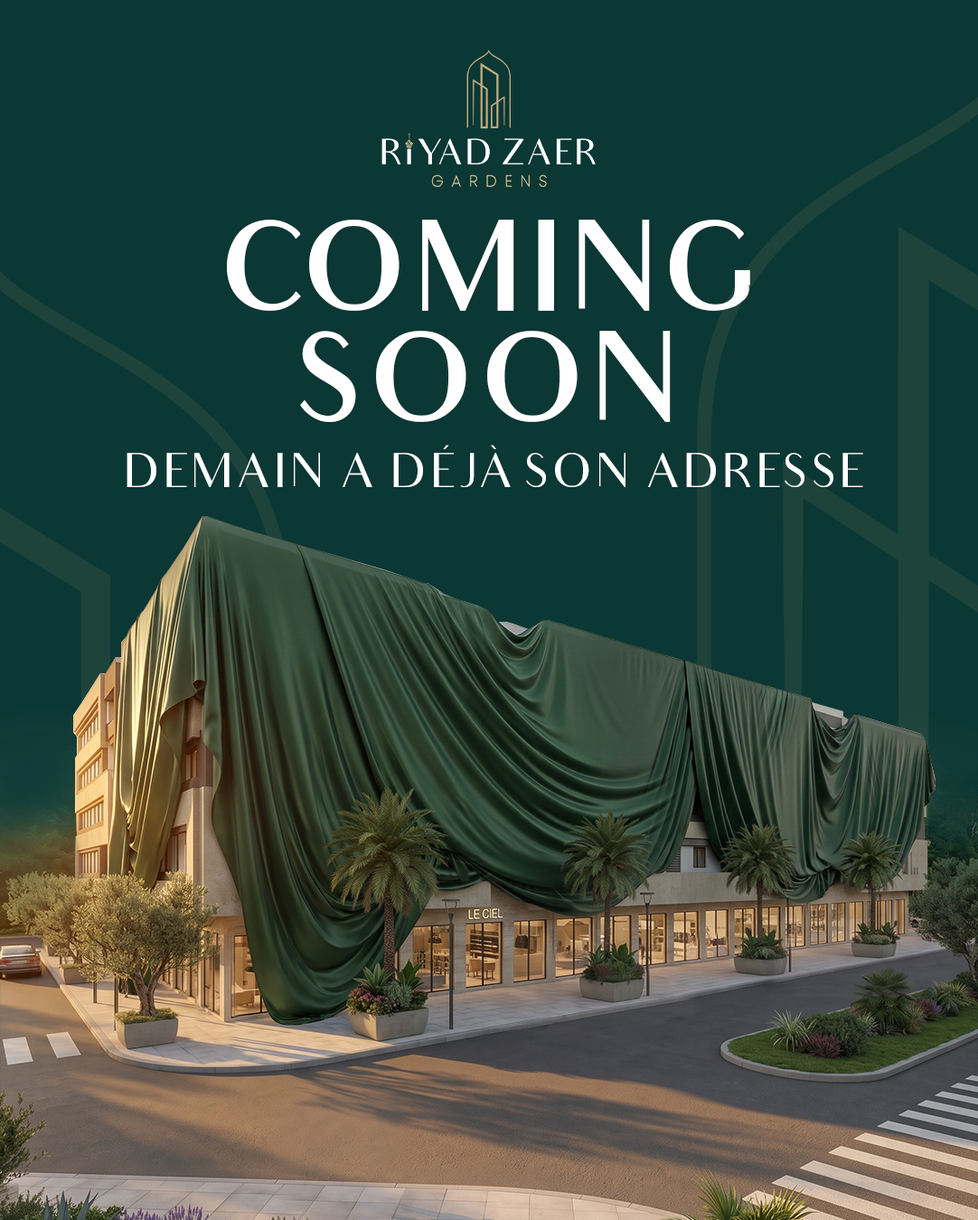
<style>
.page{position:relative;width:978px;height:1220px;background:#0b3734}
.page>*{position:absolute;margin:0}
.t1{font:121.9px "Audrey-Medium";letter-spacing:0.01em;color:#ffffff}
.t2{font:47.5px "Audrey-Normal";letter-spacing:0.01em;color:#ffffff;text-transform:uppercase}
</style>
<div class="page">
<p class="t1" style="left:227px;top:220px;width:523px;height:91px">COMING</p>
<p class="t1" style="left:300px;top:331px;width:370px;height:91px">SOON</p>
<p class="t2" style="left:126px;top:445px;width:737px;height:42px">Demain a déjà son adresse</p>
</div>
